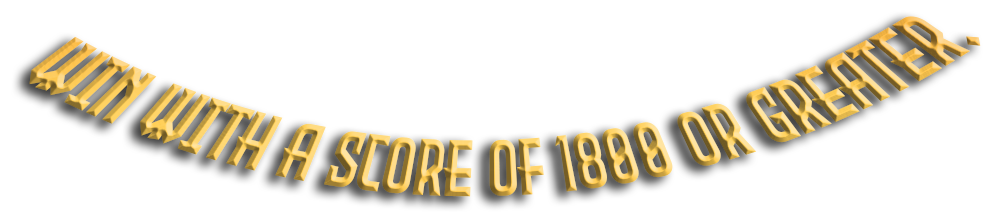
<style>
.page{position:relative;width:988px;height:215px;background:#ffffff}
.page>*{position:absolute;margin:0}
.t1{font:46.5px "EvilEmpire"}
</style>
<div class="page">
<p class="t1" style="left:29px;top:16px;width:952px;height:181px;rotate:-2deg">Win with a score of 1800 or greater.</p>
</div>
